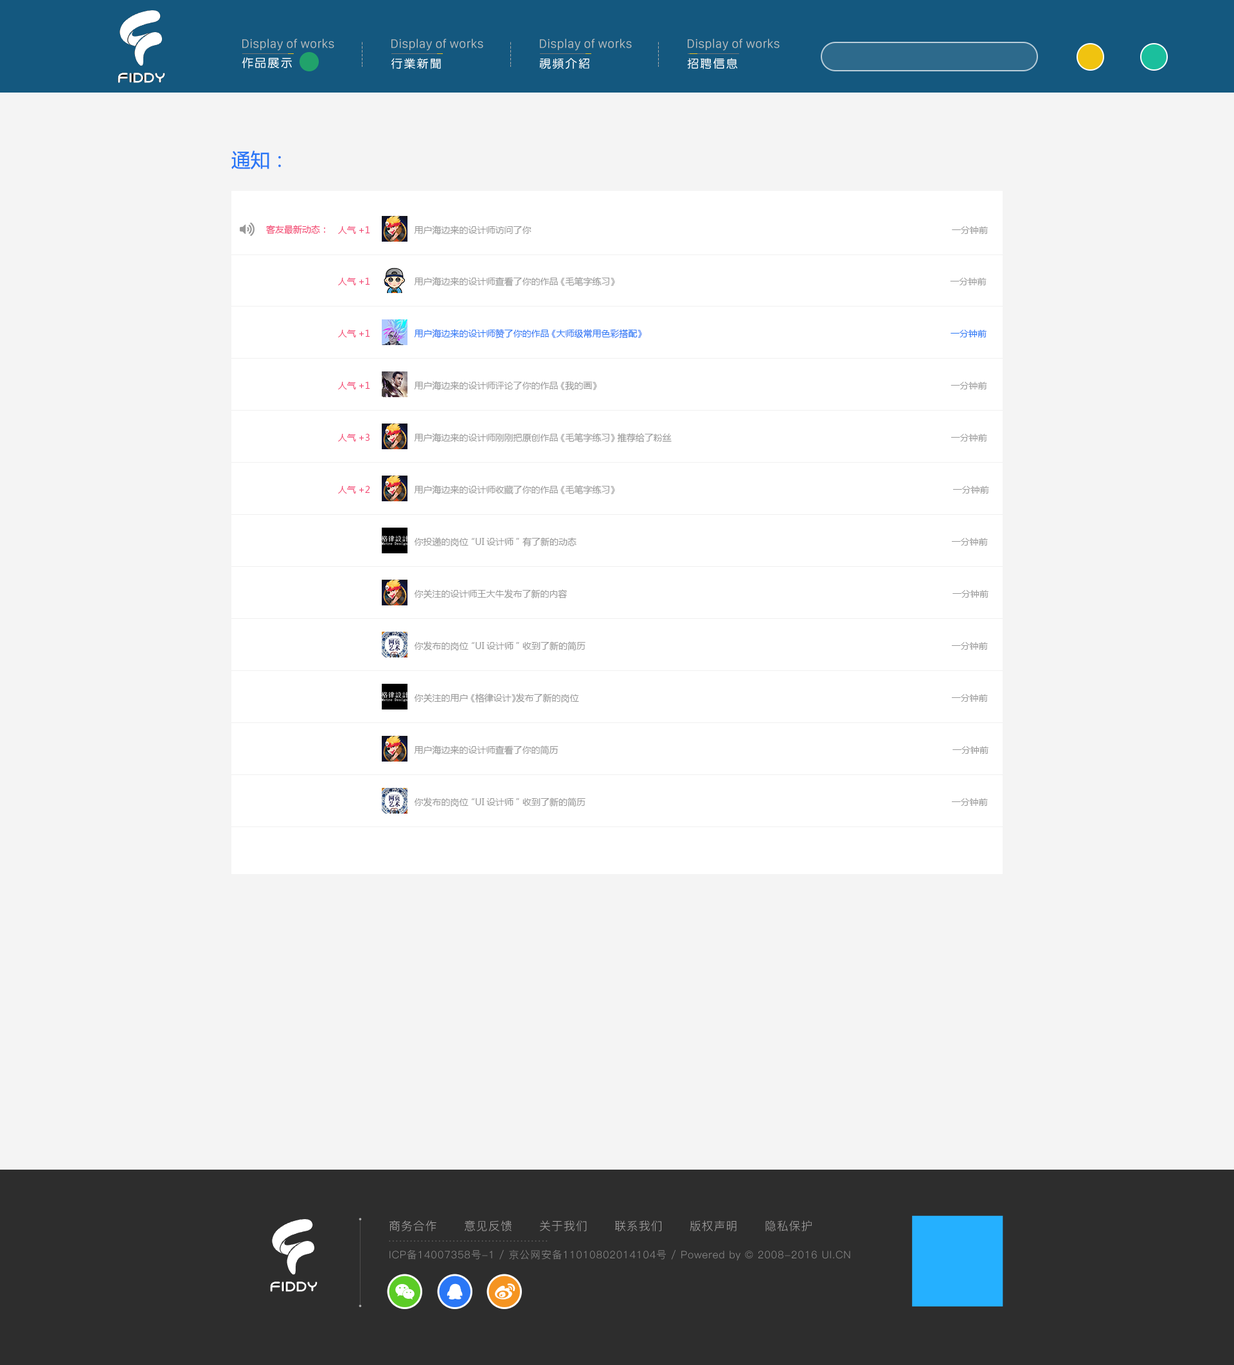
<style>
.page{position:relative;width:1234px;height:1365px;background:#f4f4f4}
.page>*{position:absolute;margin:0}
.t1{font:12.9px "SanFranciscoDisplay-Regular";letter-spacing:0.02em;color:#bdbebe}
.t2{font:11.6px "FZY3FW--GB1-0";letter-spacing:0.12em;color:#ffffff}
.t3{font:19.3px "MicrosoftYaHei";color:#2a77f6}
.t4{font:9px "MicrosoftYaHei";color:#f34370}
.t5{font:9px "MicrosoftYaHei";color:#999999}
.t6{font:9px "MicrosoftYaHei";color:#2a77f6}
.t7{font:11.6px "PingFang-SC-Regular";letter-spacing:0.05em;color:#a7a5a5}
.t8{font:11.6px "PingFang-SC-Regular";letter-spacing:0.05em;color:#605f5f}
.t9{font:10.3px "PingFang-SC-Regular";letter-spacing:0.05em;color:#8c8c8c}
</style>
<div class="page">
<p class="t1" style="left:242px;top:39px;width:92px;height:12px">Display of works</p>
<p class="t1" style="left:392px;top:39px;width:91px;height:12px">Display of works</p>
<p class="t1" style="left:540px;top:39px;width:92px;height:12px">Display of works</p>
<p class="t1" style="left:688px;top:39px;width:92px;height:12px">Display of works</p>
<p class="t2" style="left:242px;top:57px;width:50px;height:12px">作品展示</p>
<p class="t2" style="left:392px;top:58px;width:49px;height:11px">行业新闻</p>
<p class="t2" style="left:539px;top:58px;width:51px;height:11px">视频介绍</p>
<p class="t2" style="left:687px;top:58px;width:51px;height:11px">招聘信息</p>
<p class="t3" style="left:231px;top:150px;width:50px;height:20px">通知：</p>
<p class="t4" style="left:266px;top:225px;width:59px;height:10px">客友最新动态：</p>
<p class="t4" style="left:338px;top:226px;width:32px;height:8px">人气+1</p>
<p class="t5" style="left:414px;top:226px;width:574px;height:9px">用户海边来的设计师访问了你                                                                                                                                                              一分钟前</p>
<p class="t4" style="left:338px;top:278px;width:32px;height:7px">人气+1</p>
<p class="t5" style="left:414px;top:277px;width:573px;height:10px">用户海边来的设计师查看了你的作品 《毛笔字练习》                                                                                                                              一分钟前</p>
<p class="t4" style="left:338px;top:330px;width:32px;height:8px">人气+1</p>
<p class="t6" style="left:414px;top:329px;width:573px;height:10px">用户海边来的设计师赞了你的作品 《大师级常用色彩搭配》                                                                                                                    一分钟前</p>
<p class="t4" style="left:338px;top:382px;width:32px;height:8px">人气+1</p>
<p class="t5" style="left:414px;top:381px;width:573px;height:10px">用户海边来的设计师评论了你的作品 《我的画》                                                                                                                                     一分钟前</p>
<p class="t4" style="left:338px;top:434px;width:32px;height:8px">人气+3</p>
<p class="t5" style="left:414px;top:433px;width:573px;height:10px">用户海边来的设计师刚刚把原创作品 《毛笔字练习》 推荐给了粉丝                                                                                                         一分钟前</p>
<p class="t5" style="left:414px;top:485px;width:575px;height:10px">用户海边来的设计师收藏了你的作品 《毛笔字练习》                                                                                                                               一分钟前</p>
<p class="t4" style="left:338px;top:486px;width:32px;height:8px">人气+2</p>
<p class="t5" style="left:414px;top:537px;width:574px;height:10px">你投递的岗位“UI设计师”有了新的动态                                                                                                                      一分钟前</p>
<p class="t5" style="left:414px;top:590px;width:575px;height:8px">你关注的设计师王大牛发布了新的内容                                                                                                                               一分钟前</p>
<p class="t5" style="left:414px;top:642px;width:574px;height:9px">你发布的岗位“UI设计师”收到了新的简历                                                                                                                      一分钟前</p>
<p class="t5" style="left:414px;top:694px;width:574px;height:9px">你关注的用户 《格律设计》发布了新的岗位                                                                                                                      一分钟前</p>
<p class="t5" style="left:414px;top:746px;width:575px;height:9px">用户海边来的设计师查看了你的简历                                                                                                                               一分钟前</p>
<p class="t5" style="left:414px;top:798px;width:574px;height:9px">你发布的岗位“UI设计师”收到了新的简历                                                                                                                      一分钟前</p>
<p class="t7" style="left:390px;top:1221px;width:422px;height:11px">商务合作      意见反馈      关于我们      联系我们      版权声明      隐私保护</p>
<p class="t8" style="left:389px;top:1241px;width:159px;height:1px">.............................................</p>
<p class="t9" style="left:390px;top:1250px;width:461px;height:11px">ICP备14007358号-1 / 京公网安备11010802014104号 / Powered by © 2008-2016 UI.CN</p>
</div>
